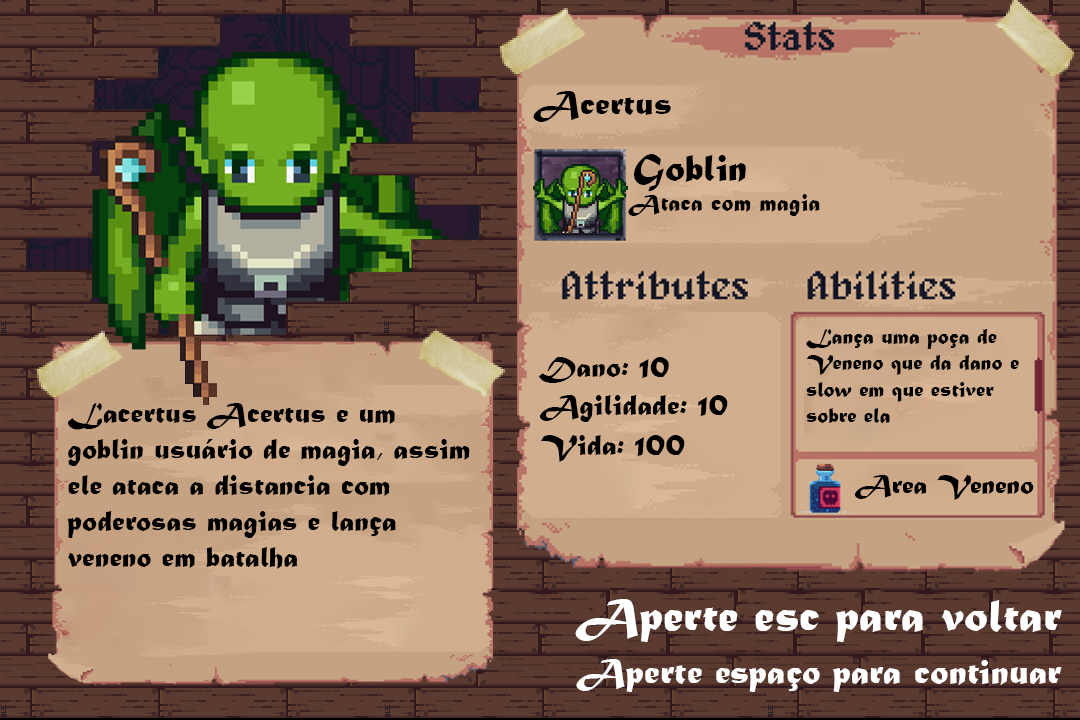
<style>
.page{position:relative;width:1080px;height:720px}
.page>*{position:absolute;margin:0}
.t1{font:35px "MaturaMTScriptCapitals";letter-spacing:0.005em;color:#000000}
.t2{font:40.1px "MaturaMTScriptCapitals";letter-spacing:0.005em;color:#000000}
.t3{font:24.2px "MaturaMTScriptCapitals";letter-spacing:0.005em;color:#000000}
.t4{font:22px "MaturaMTScriptCapitals";letter-spacing:0.005em;color:#000000}
.t5{font:30px "MaturaMTScriptCapitals";letter-spacing:0.005em;color:#000000}
.t6{font:27.6px "MaturaMTScriptCapitals";letter-spacing:0.005em;color:#000000}
.t7{font:48px "MaturaMTScriptCapitals";letter-spacing:0.005em;color:#ffffff}
.t8{font:37.1px "MaturaMTScriptCapitals";letter-spacing:0.005em;color:#ffffff}
</style>
<div class="page">
<p class="t1" style="left:533px;top:91px;width:138px;height:31px">Acertus</p>
<p class="t2" style="left:634px;top:154px;width:112px;height:37px">Goblin</p>
<p class="t3" style="left:628px;top:194px;width:192px;height:22px">Ataca com magia</p>
<p class="t4" style="left:806px;top:329px;width:213px;height:94px">Lança uma poça de Veneno que da dano e slow em que estiver sobre ela</p>
<p class="t5" style="left:538px;top:357px;width:131px;height:26px">Dano: 10</p>
<p class="t5" style="left:539px;top:395px;width:189px;height:27px">Agilidade: 10</p>
<p class="t5" style="left:67px;top:403px;width:403px;height:166px">Lacertus Acertus e um goblin usuário de magia, assim ele ataca a distancia com poderosas magias e lança veneno em batalha</p>
<p class="t5" style="left:540px;top:435px;width:145px;height:27px">Vida: 100</p>
<p class="t6" style="left:854px;top:475px;width:180px;height:25px">Area Veneno</p>
<p class="t7" style="left:575px;top:599px;width:487px;height:43px">Aperte esc para voltar</p>
<p class="t8" style="left:576px;top:659px;width:486px;height:33px">Aperte espaço para continuar</p>
</div>
